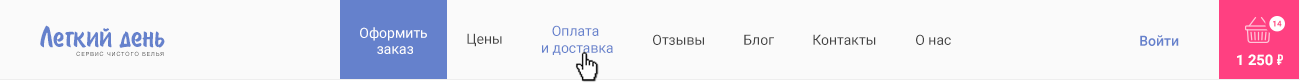
<style>
.page{position:relative;width:1300px;height:84px;background:#fafafa}
.page>*{position:absolute;margin:0}
.t1{font:33.4px "BrushType-SemiBold";color:#6581cc}
.t2{font:14px/16px "Roboto-Regular";color:#ffffff}
.t3{font:14px/16.9px "Roboto-Regular";color:#6581cc}
.t4{font:8.1px "Roboto-Bold";text-transform:uppercase}
.t5{font:14px "Roboto-Regular";color:#424242}
.t6{font:14px "Roboto-Medium";color:#6581cc}
.t7{font:5.7px "HelveticaNeue";letter-spacing:0.15em;text-transform:uppercase}
.t8{font:14.6px "Roboto-Bold";color:#ffffff}
.t9{font:14.6px "PTRoubleSans";color:#ffffff}
</style>
<div class="page">
<p class="t1" style="left:40px;top:25px;width:125px;height:23px">Легкий день</p>
<p class="t2" style="left:360px;top:27px;width:67px;height:27px;text-align:center">Оформить <br>заказ</p>
<p class="t3" style="left:542px;top:25px;width:71px;height:30px;text-align:center">Оплата <br>и доставка</p>
<p class="t4" style="left:1273px;top:20px;width:9px;height:7px">14</p>
<p class="t5" style="left:467px;top:33px;width:35px;height:14px">Цены</p>
<p class="t5" style="left:653px;top:34px;width:51px;height:11px">Отзывы</p>
<p class="t5" style="left:744px;top:34px;width:30px;height:11px">Блог</p>
<p class="t5" style="left:813px;top:34px;width:63px;height:11px">Контакты</p>
<p class="t5" style="left:916px;top:34px;width:35px;height:11px">О нас</p>
<p class="t6" style="left:1140px;top:35px;width:39px;height:11px">Войти</p>
<p class="t7" style="left:76px;top:51px;width:88px;height:5px">Сервис чистого белья</p>
<p class="t8" style="left:1237px;top:54px;width:46px;height:12px">1 250 <span class="t9">1</span></p>
</div>
